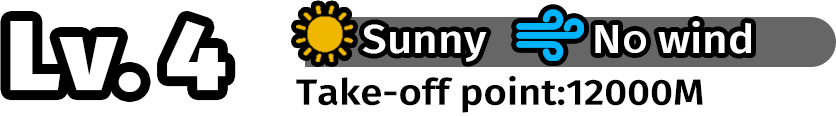
<style>
.page{position:relative;width:836px;height:116px;background:#ffffff}
.page>*{position:absolute;margin:0}
.t1{font:99px "FiraSans-Black";color:#ffffff;scale:1.07 1}
.t2{font:39.6px "FiraSans-Medium";color:#ffffff;scale:1.11 1}
.t3{font:39.6px "AdobeHeitiStd-Regular";color:#ffffff;scale:1.11 1}
.t4{font:36px "FiraSans-Medium";color:#000000;scale:1.11 1}
</style>
<div class="page">
<p class="t1" style="left:10px;top:20px;width:216px;height:72px">Lv. 4</p>
<p class="t2" style="left:362px;top:24px;width:125px;height:38px">Sunny</p>
<p class="t2" style="left:595px;top:21px;width:156px;height:33px">N<span class="t3">o </span>wind</p>
<p class="t4" style="left:296px;top:75px;width:407px;height:38px">Take-off point:12000M</p>
</div>
